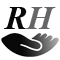
<style>
.page{position:relative;width:60px;height:60px;background:#ffffff}
.page>*{position:absolute;margin:0}
.t1{font:33.4px "TimesNewRomanPS-BoldItalicMT";color:#090909}
.t2{font:33.4px "TimesNewRomanPS-BoldItalicMT";color:#666666}
</style>
<div class="page">
<p class="t1" style="left:4px;top:7px;width:52px;height:22px">R<span class="t2">H</span></p>
</div>
